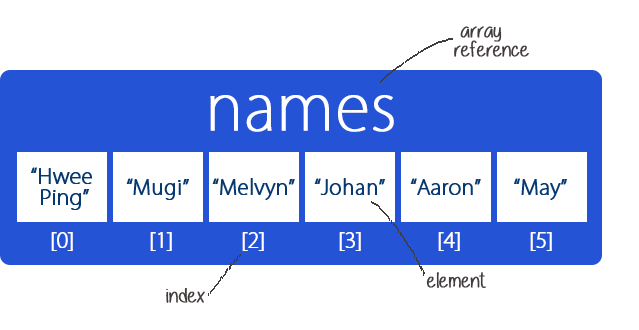
<style>
.page{position:relative;width:639px;height:330px;background:#ffffff}
.page>*{position:absolute;margin:0}
.t1{font:20.8px/18.8px "Alittlesunshine";letter-spacing:0.01em;color:#423b3b;font-weight:bold;scale:1.1 1}
.t2{font:62.5px "KozGoPro-ExtraLight";color:#ffffff;font-weight:bold}
.t3{font:20.8px/20.8px "KozGoPro-ExtraLight";color:#063972;font-weight:bold}
.t4{font:20.8px "KozGoPro-ExtraLight";color:#063972;font-weight:bold}
.t5{font:20.8px "KozGoPro-ExtraLight";color:#ffffff;font-weight:bold}
.t6{font:20.8px "Alittlesunshine";letter-spacing:0.01em;color:#423b3b;font-weight:bold;scale:1.1 1}
</style>
<div class="page">
<p class="t1" style="left:454px;top:26px;width:75px;height:31px">array<br>reference</p>
<p class="t2" style="left:210px;top:95px;width:184px;height:37px">names</p>
<p class="t3" style="left:31px;top:167px;width:61px;height:43px;text-align:center">“Hwee <br>Ping”</p>
<p class="t4" style="left:126px;top:178px;width:63px;height:22px">“Mugi”</p>
<p class="t4" style="left:212px;top:178px;width:83px;height:22px">“Melvyn”</p>
<p class="t4" style="left:314px;top:178px;width:71px;height:17px">“Johan”</p>
<p class="t4" style="left:410px;top:178px;width:71px;height:17px">“Aaron”</p>
<p class="t4" style="left:514px;top:178px;width:53px;height:22px">“May”</p>
<p class="t5" style="left:51px;top:232px;width:501px;height:19px">[0]       [1]    [2]   [3]       [4]    [5]</p>
<p class="t6" style="left:426px;top:272px;width:60px;height:16px">element</p>
<p class="t6" style="left:166px;top:288px;width:39px;height:15px">index</p>
</div>
